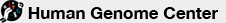
<style>
.page{position:relative;width:226px;height:23px;background:#eeeeee}
.page>*{position:absolute;margin:0}
.t1{font:17px "HelveticaNeue-Bold";color:#000000}
</style>
<div class="page">
<p class="t1" style="left:28px;top:7px;width:190px;height:12px">Human Genome Center</p>
</div>
